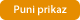
<style>
.page{position:relative;width:80px;height:20px;background:#e68d00}
.page>*{position:absolute;margin:0}
.t1{font:11px "MyriadPro-Semibold";color:#ffffff}
</style>
<div class="page">
<p class="t1" style="left:14px;top:5px;width:53px;height:11px">Puni prikaz</p>
</div>
